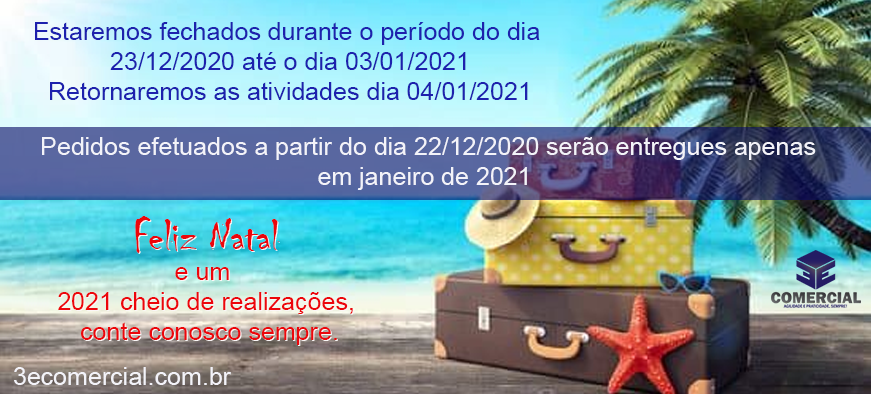
<style>
.page{position:relative;width:871px;height:394px}
.page>*{position:absolute;margin:0}
.t1{font:25px "ArialMT";color:#1d21ad}
.t2{font:25px "ArialMT";color:#f3f3f9}
.t3{font:25px "ArialMT";color:#ec060b}
.t4{font:45.8px "Chiller-Regular";color:#ec060b}
.t5{font:25px "ArialMT"}
.t6{font:45.8px "Chiller-Regular"}
</style>
<div class="page">
<p class="t1" style="left:35px;top:22px;width:505px;height:78px;text-align:center">Estaremos fechados durante o período do dia <br>23/12/2020 até o dia 03/01/2021<br>Retornaremos as atividades dia 04/01/2021</p>
<p class="t2" style="left:42px;top:137px;width:774px;height:53px;text-align:center">Pedidos efetuados a partir do dia 22/12/2020 serão entregues apenas<br>em janeiro de 2021</p>
<p class="t3" style="left:58px;top:216px;width:295px;height:129px;text-align:center"><span class="t4">Feliz Natal<br></span>e um <br>2021 cheio de realizações,<br> conte conosco sempre.</p>
<p class="t5" style="left:59px;top:217px;width:295px;height:129px;text-align:center"><span class="t6">Feliz Natal<br></span>e um <br>2021 cheio de realizações,<br> conte conosco sempre.</p>
<p class="t2" style="left:14px;top:367px;width:217px;height:18px">3ecomercial.com.br</p>
</div>
